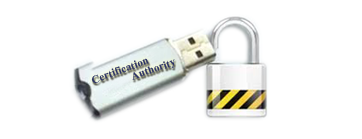
<style>
.page{position:relative;width:362px;height:139px;background:#ffffff}
.page>*{position:absolute;margin:0}
.t1{font:11px/10px "TimesNewRomanPS-BoldMT";color:#2d3466}
</style>
<div class="page">
<p class="t1" style="left:91px;top:58px;width:84px;height:26px;text-align:center;rotate:-20deg">Certification <br>                      Authority</p>
</div>
